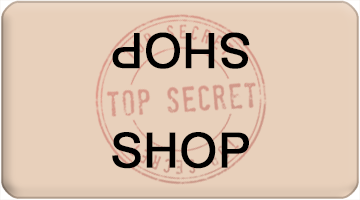
<style>
.page{position:relative;width:360px;height:200px;background:#e8d0bb}
.page>*{position:absolute;margin:0}
.t1{font:48px "ArialMT";color:#000000;font-weight:bold}
</style>
<div class="page">
<p class="t1" style="left:112px;top:32px;width:138px;height:37px;rotate:180deg">SHOP</p>
<p class="t1" style="left:112px;top:132px;width:137px;height:37px">SHOP</p>
</div>
